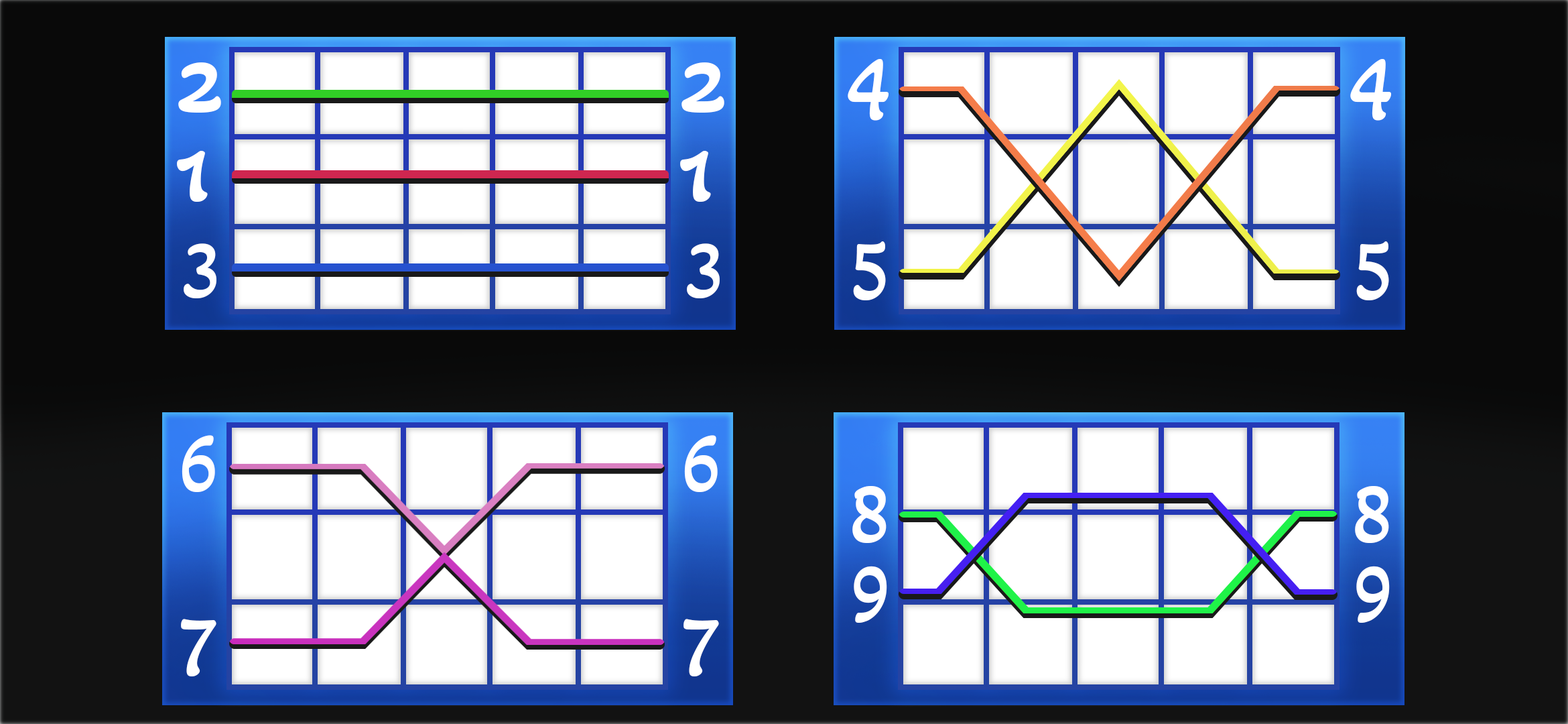
<style>
.page{position:relative;width:1568px;height:724px;background:#ffffff}
.page>*{position:absolute;margin:0}
.t1{font:109.7px "AkayaTelivigala-Regular";letter-spacing:0.04em;color:#ffffff}
.t2{font:90.9px "AkayaTelivigala-Regular";letter-spacing:0.04em;color:#ffffff}
.t3{font:82.1px "AkayaTelivigala-Regular";letter-spacing:0.04em;color:#ffffff}
.t4{font:84.3px "AkayaTelivigala-Regular";letter-spacing:0.04em;color:#ffffff}
</style>
<div class="page">
<p class="t1" style="left:178px;top:62px;width:43px;height:51px">2</p>
<p class="t1" style="left:681px;top:62px;width:43px;height:51px">2</p>
<p class="t2" style="left:848px;top:59px;width:41px;height:62px">4</p>
<p class="t2" style="left:1350px;top:59px;width:42px;height:62px">4</p>
<p class="t1" style="left:177px;top:151px;width:31px;height:51px">1</p>
<p class="t1" style="left:680px;top:151px;width:31px;height:51px">1</p>
<p class="t3" style="left:184px;top:243px;width:32px;height:55px">3</p>
<p class="t3" style="left:687px;top:243px;width:33px;height:55px">3</p>
<p class="t4" style="left:853px;top:241px;width:33px;height:59px">5</p>
<p class="t4" style="left:1356px;top:241px;width:33px;height:59px">5</p>
<p class="t4" style="left:182px;top:435px;width:33px;height:57px">6</p>
<p class="t4" style="left:684px;top:435px;width:34px;height:57px">6</p>
<p class="t4" style="left:852px;top:486px;width:35px;height:57px">8</p>
<p class="t4" style="left:1355px;top:486px;width:34px;height:57px">8</p>
<p class="t4" style="left:854px;top:566px;width:33px;height:57px">9</p>
<p class="t4" style="left:1356px;top:566px;width:34px;height:57px">9</p>
<p class="t4" style="left:181px;top:618px;width:35px;height:58px">7</p>
<p class="t4" style="left:683px;top:618px;width:36px;height:58px">7</p>
</div>
